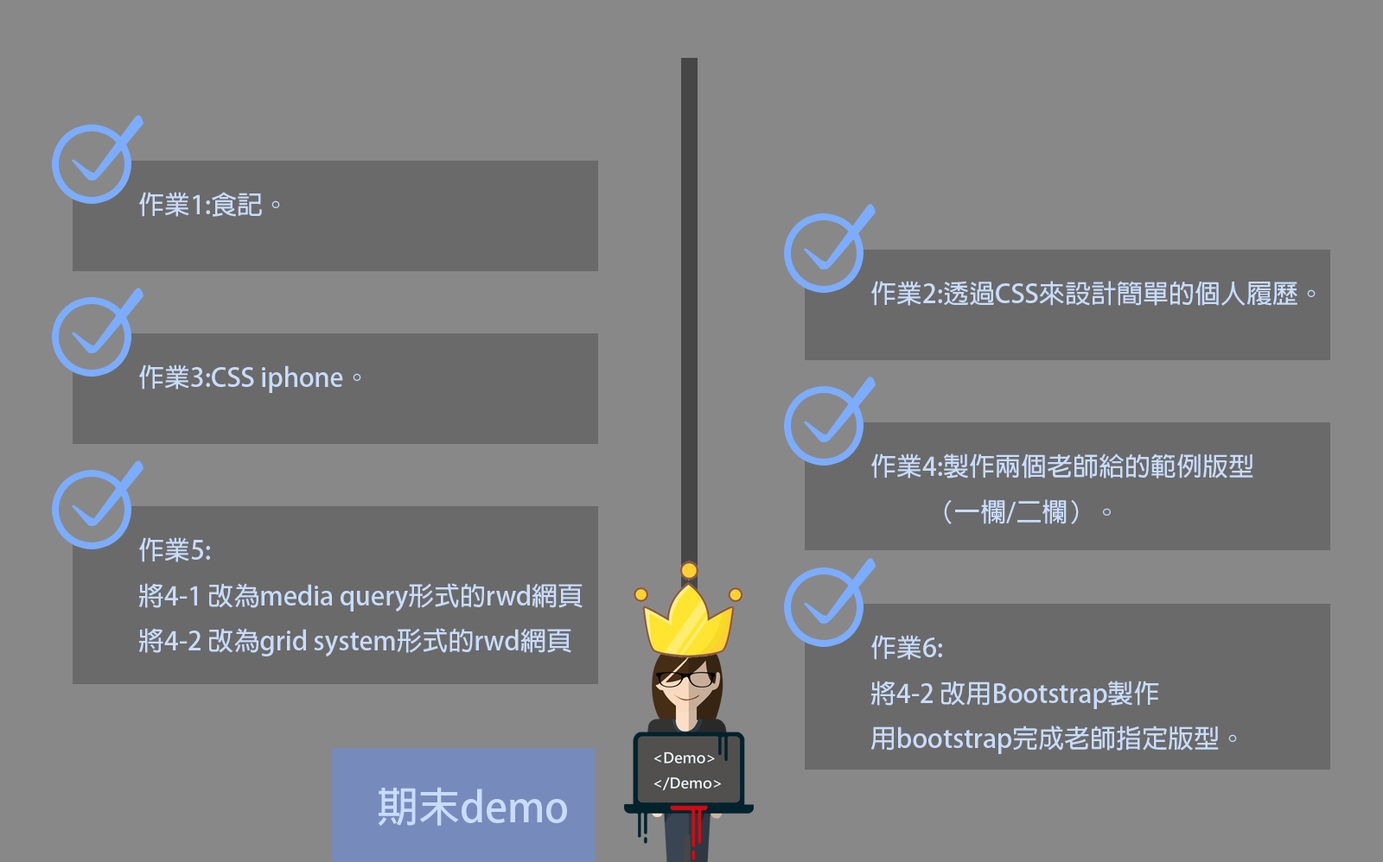
<style>
.page{position:relative;width:1383px;height:862px;background:#888888}
.page>*{position:absolute;margin:0}
.t1{font:25.9px "AdobeFanHeitiStd-Bold";color:#c8dcff}
.t2{font:41.5px "AdobeFanHeitiStd-Bold";color:#c8dcff}
</style>
<div class="page">
<p class="t1" style="left:138px;top:192px;width:142px;height:25px">作業1:食記。</p>
<p class="t1" style="left:870px;top:281px;width:445px;height:25px">作業2:透過CSS來設計簡單的個人履歷。</p>
<p class="t1" style="left:138px;top:365px;width:223px;height:28px">作業3:CSS iphone。</p>
<p class="t1" style="left:870px;top:454px;width:383px;height:71px">作業4:製作兩個老師給的範例版型<br>          （一欄/二欄）。</p>
<p class="t1" style="left:138px;top:538px;width:444px;height:119px">作業5:<br>將4-1 改為media query形式的rwd網頁<br>將4-2 改為grid system形式的rwd網頁</p>
<p class="t1" style="left:870px;top:635px;width:367px;height:119px">作業6:<br>將4-2 改用Bootstrap製作<br>用bootstrap完成老師指定版型。</p>
<p class="t2" style="left:378px;top:787px;width:189px;height:40px">期末demo</p>
</div>
